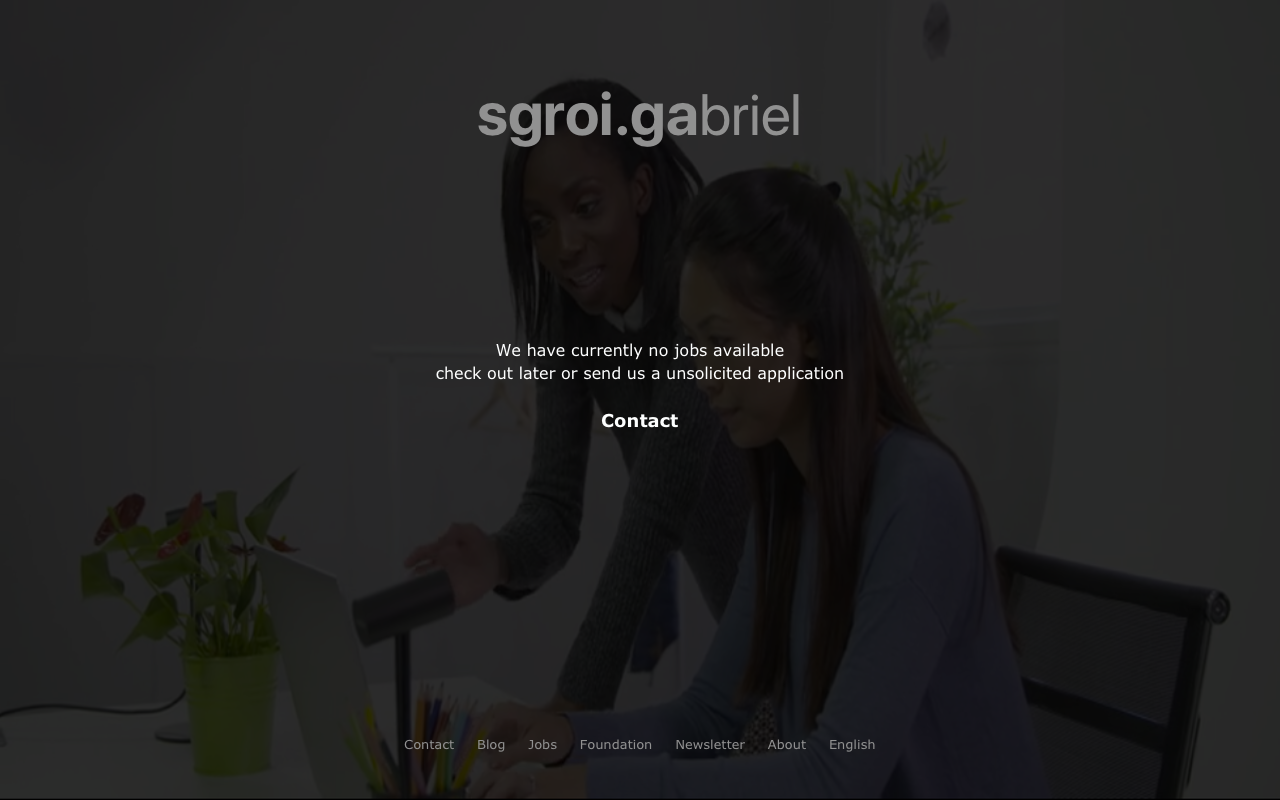
<style>
.page{position:relative;width:1280px;height:800px}
.page>*{position:absolute;margin:0}
.t1{font:60px "SFProDisplay-Bold";color:#919191}
.t2{font:58px "SFProDisplay-Regular";color:#919191}
.t3{font:16px/22.5px "Verdana";color:#fdffff}
.t4{font:18px/36.5px "Verdana-Bold";color:#fdffff}
.t5{font:13px "Verdana";color:#919191}
</style>
<div class="page">
<p class="t1" style="left:478px;top:91px;width:321px;height:56px">sgroi.ga<span class="t2">briel</span></p>
<p class="t3" style="left:436px;top:343px;width:407px;height:85px;text-align:center">We have currently no jobs available<br>check out later or send us a unsolicited application<br><br><span class="t4">Contact</span></p>
<p class="t5" style="left:404px;top:739px;width:471px;height:13px">Contact     Blog     Jobs     Foundation     Newsletter     About     English</p>
</div>
